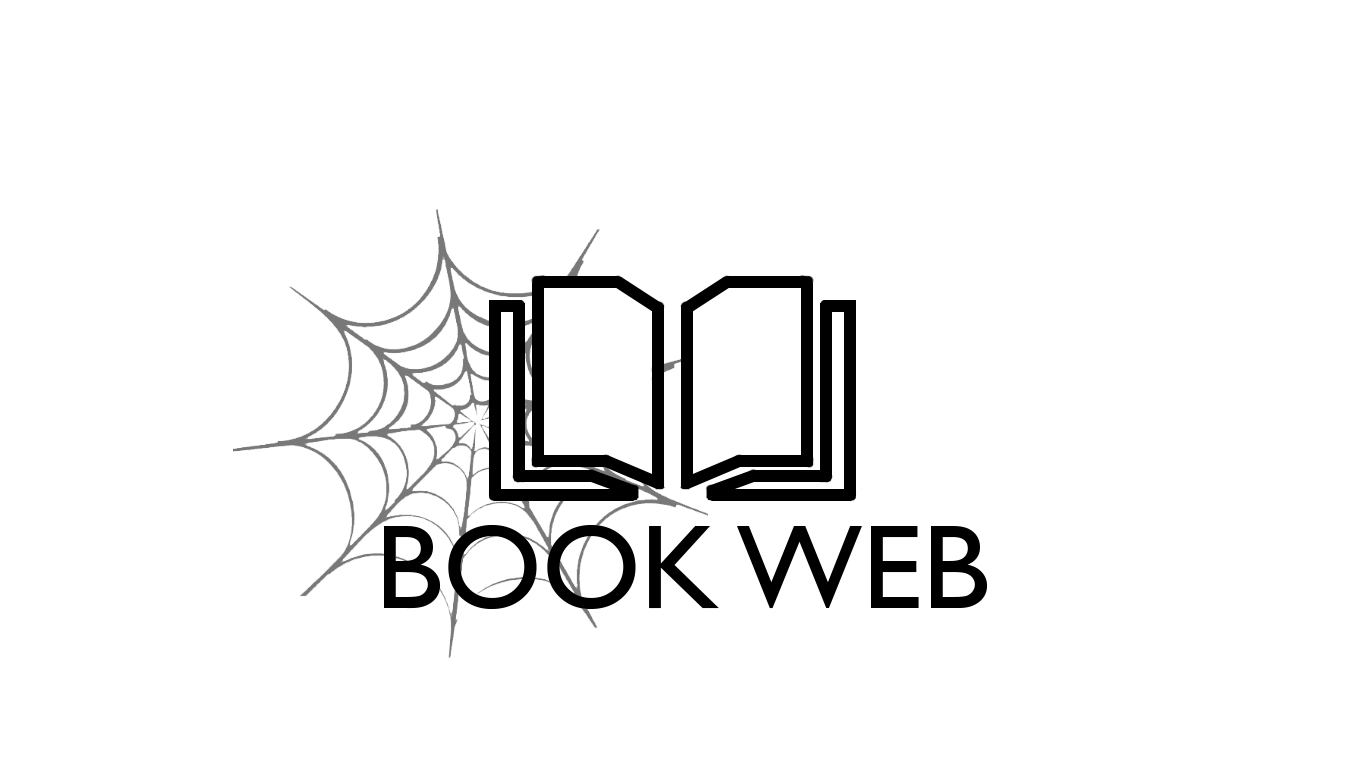
<style>
.page{position:relative;width:1366px;height:768px;background:#ffffff}
.page>*{position:absolute;margin:0}
.t1{font:120px "GillSansMT";color:#000000}
</style>
<div class="page">
<p class="t1" style="left:384px;top:525px;width:604px;height:84px">BOOK WEB</p>
</div>
